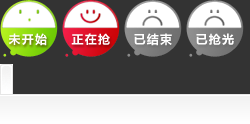
<style>
.page{position:relative;width:250px;height:124px;background:#333333}
.page>*{position:absolute;margin:0}
.t1{font:12px "MicrosoftYaHei";letter-spacing:0.1em;color:#ffffff}
</style>
<div class="page">
<p class="t1" style="left:8px;top:33px;width:39px;height:13px">未开始</p>
<p class="t1" style="left:71px;top:33px;width:39px;height:12px">正在抢</p>
<p class="t1" style="left:134px;top:33px;width:38px;height:13px">已结束</p>
<p class="t1" style="left:196px;top:33px;width:38px;height:12px">已抢光</p>
</div>
